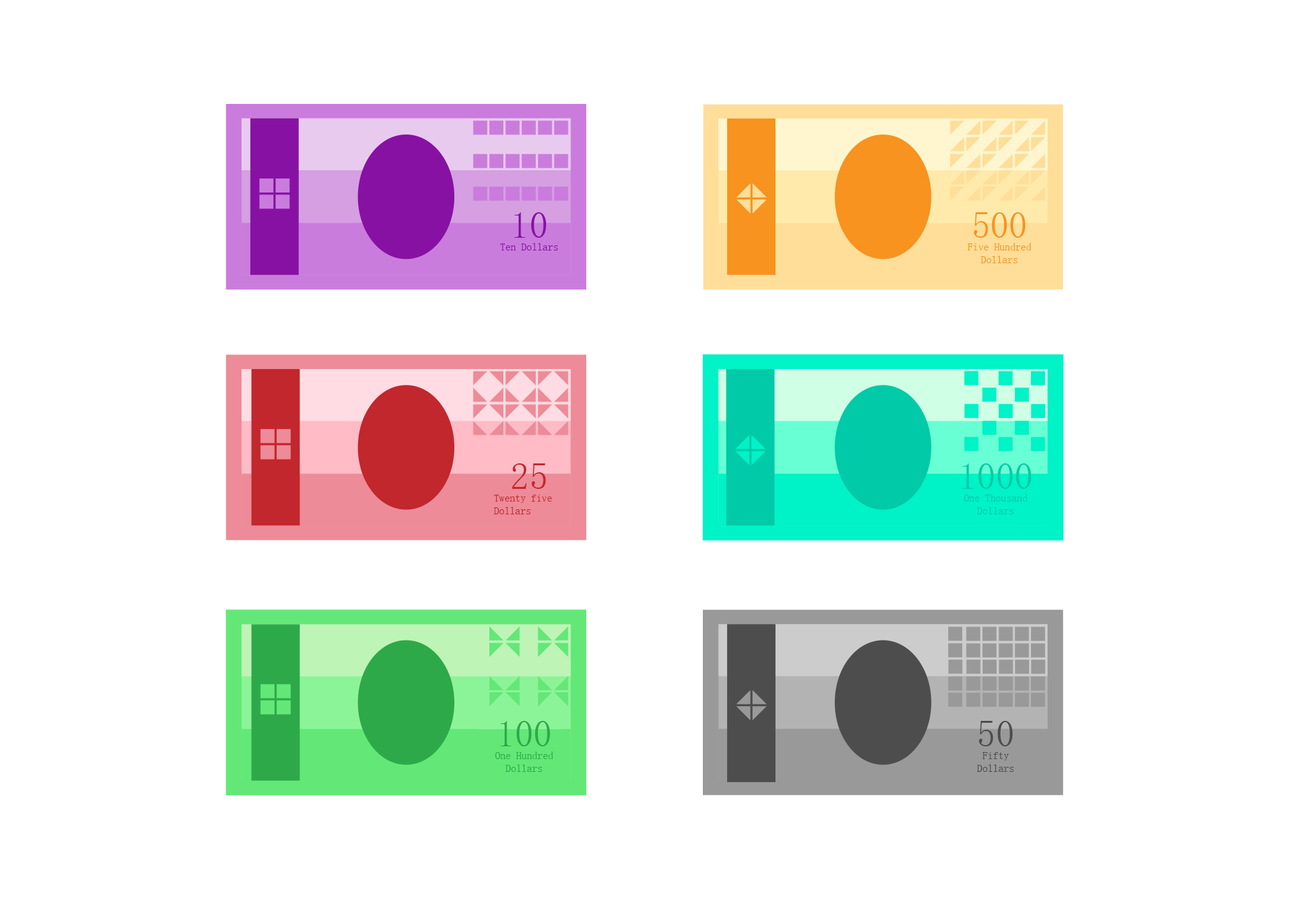
<style>
.page{position:relative;width:1305px;height:914px;background:#ffffff}
.page>*{position:absolute;margin:0}
.t1{font:10.6px "SimSun";color:#8711a3}
.t2{font:37.2px "SimSun";color:#8711a3}
.t3{font:10.6px "SimSun";color:#f7931e}
.t4{font:37.2px "SimSun";color:#f7931e}
.t5{font:10.6px "SimSun";color:#c1272d}
.t6{font:37.2px "SimSun";color:#c1272d}
.t7{font:10.6px "SimSun";color:#00caa7}
.t8{font:37.2px "SimSun";color:#00caa7}
.t9{font:10.6px "SimSun";color:#2ea94a}
.t10{font:37.2px "SimSun";color:#2ea94a}
.t11{font:10.6px "SimSun";color:#4d4d4d}
.t12{font:37.2px "SimSun";color:#4d4d4d}
</style>
<div class="page">
<p class="t1" style="left:500px;top:212px;width:58px;height:38px;text-align:center"><span class="t2">10<br></span>Ten Dollars</p>
<p class="t3" style="left:967px;top:212px;width:65px;height:51px;text-align:center"><span class="t4">500<br></span>Five Hundred Dollars</p>
<p class="t5" style="left:494px;top:463px;width:58px;height:51px;text-align:center"><span class="t6">25<br></span>Twenty five<br>Dollars</p>
<p class="t7" style="left:962px;top:463px;width:69px;height:51px;text-align:center"><span class="t8">1000<br></span>One Thousand<br>Dollars</p>
<p class="t9" style="left:495px;top:721px;width:59px;height:51px;text-align:center"><span class="t10">100<br></span>One Hundred<br>Dollars</p>
<p class="t11" style="left:977px;top:721px;width:37px;height:51px;text-align:center"><span class="t12">50<br></span>Fifty<br>Dollars</p>
</div>
